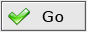
<style>
.page{position:relative;width:87px;height:32px;background:#e7e7e7}
.page>*{position:absolute;margin:0}
.t1{font:15px "Verdana";letter-spacing:0.075em;color:#000000}
</style>
<div class="page">
<p class="t1" style="left:42px;top:9px;width:23px;height:16px">Go</p>
</div>
